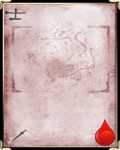
<style>
.page{position:relative;width:120px;height:150px}
.page>*{position:absolute;margin:0}
.t1{font:25px "FZGLJW--GB1-0";color:#595151}
</style>
<div class="page">
<p class="t1" style="left:4px;top:8px;width:22px;height:13px">士</p>
</div>
